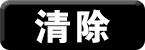
<style>
.page{position:relative;width:145px;height:50px;background:#000000}
.page>*{position:absolute;margin:0}
.t1{font:36px "FZDHTJW--GB1-0";letter-spacing:0.1em;color:#ffffff}
</style>
<div class="page">
<p class="t1" style="left:34px;top:9px;width:76px;height:35px">清除</p>
</div>
